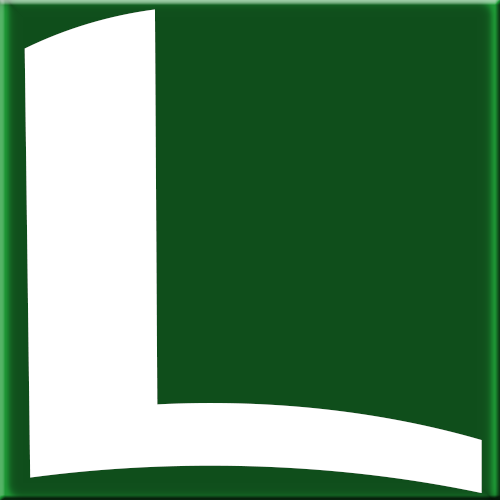
<style>
.page{position:relative;width:500px;height:500px;background:#0f4e1b}
.page>*{position:absolute;margin:0}
.t1{font:540px "Lato-Semibold";color:#ffffff;scale:2 1}
</style>
<div class="page">
<p class="t1" style="left:24px;top:9px;width:458px;height:485px">L</p>
</div>
